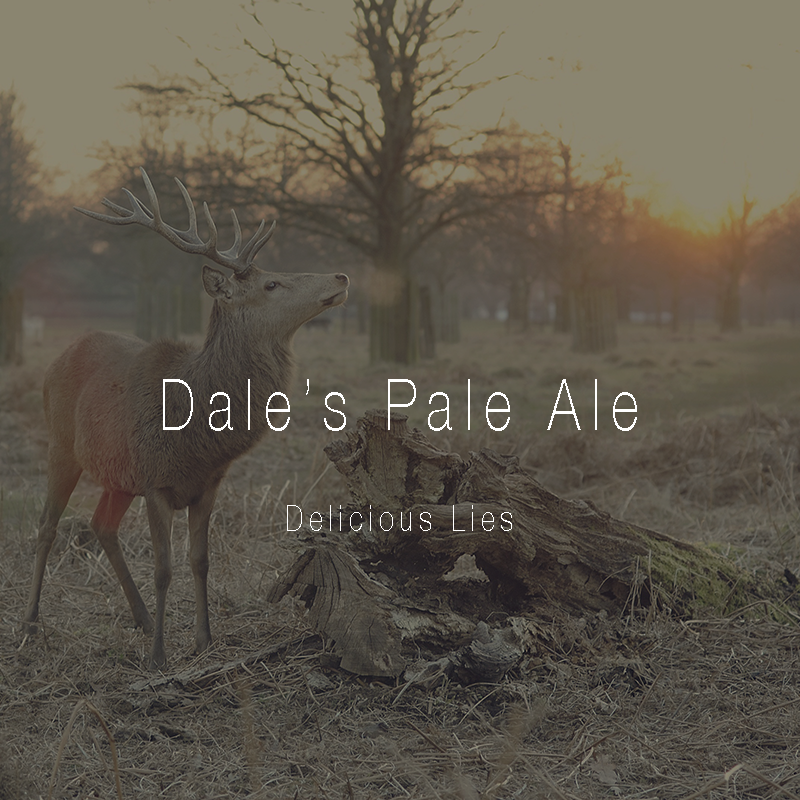
<style>
.page{position:relative;width:800px;height:800px}
.page>*{position:absolute;margin:0}
.t1{font:72px "HelveticaNeue-Thin";letter-spacing:0.2em;color:#ffffff;scale:0.75 1}
.t2{font:36px "HelveticaNeue-Thin";letter-spacing:0.2em;color:#ffffff;scale:0.75 1}
</style>
<div class="page">
<p class="t1" style="left:163px;top:379px;width:474px;height:52px">Dale’s Pale Ale</p>
<p class="t2" style="left:287px;top:505px;width:225px;height:26px">Delicious Lies</p>
</div>
